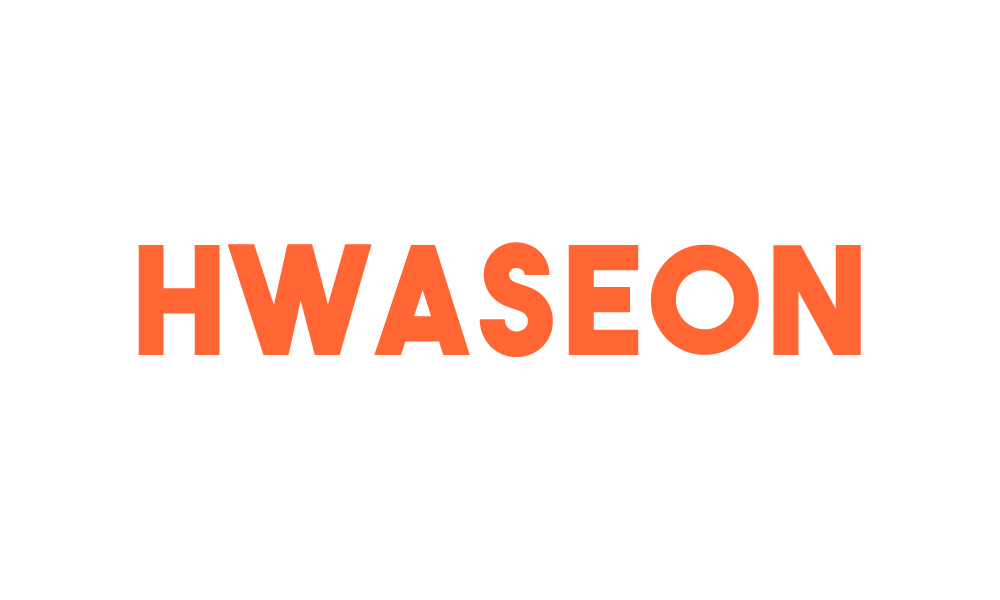
<style>
.page{position:relative;width:1000px;height:600px;background:#ffffff}
.page>*{position:absolute;margin:0}
.t1{font:150px "TheBoldFont";letter-spacing:0.05em;color:#ff6633}
</style>
<div class="page">
<p class="t1" style="left:138px;top:242px;width:723px;height:115px">HWASEON</p>
</div>
